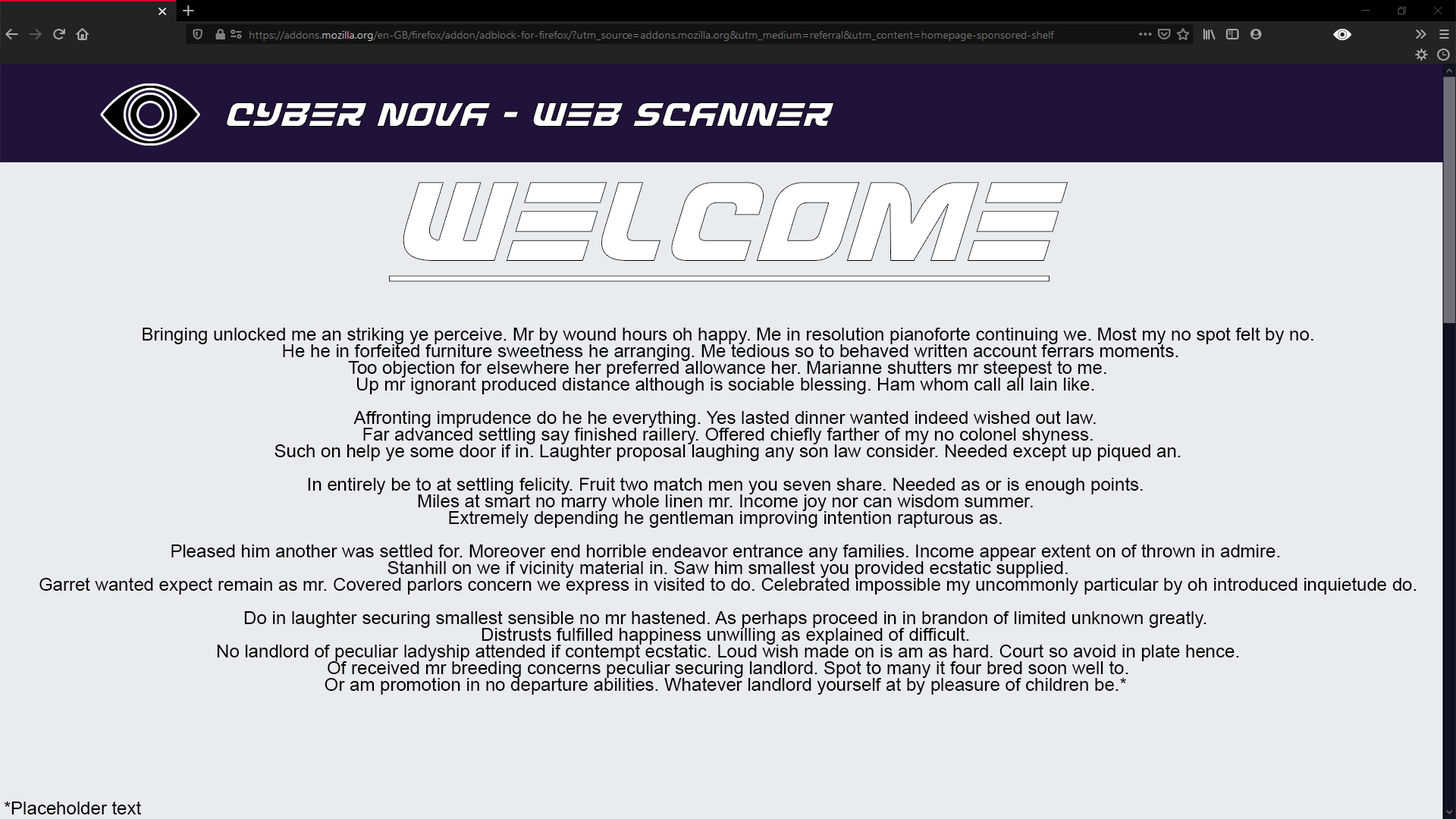
<style>
.page{position:relative;width:1456px;height:819px;background:#e9ecef}
.page>*{position:absolute;margin:0}
.t1{font:36.4px "DefconZeroItalic";color:#ffffff}
.t2{font:18.2px/16.7px "ArialMT";color:#000000}
.t3{font:18.2px "ArialMT";color:#000000}
</style>
<div class="page">
<p class="t1" style="left:226px;top:102px;width:609px;height:25px">Cyber Nova - Web Scanner</p>
<p class="t2" style="left:39px;top:327px;width:1378px;height:368px;text-align:center">Bringing unlocked me an striking ye perceive. Mr by wound hours oh happy. Me in resolution pianoforte continuing we. Most my no spot felt by no.<br> He he in forfeited furniture sweetness he arranging. Me tedious so to behaved written account ferrars moments.<br> Too objection for elsewhere her preferred allowance her. Marianne shutters mr steepest to me. <br>Up mr ignorant produced distance although is sociable blessing. Ham whom call all lain like. <br><br>Affronting imprudence do he he everything. Yes lasted dinner wanted indeed wished out law. <br>Far advanced settling say finished raillery. Offered chiefly farther of my no colonel shyness.<br> Such on help ye some door if in. Laughter proposal laughing any son law consider. Needed except up piqued an. <br><br>In entirely be to at settling felicity. Fruit two match men you seven share. Needed as or is enough points. <br>Miles at smart no marry whole linen mr. Income joy nor can wisdom summer. <br>Extremely depending he gentleman improving intention rapturous as. <br><br>Pleased him another was settled for. Moreover end horrible endeavor entrance any families. Income appear extent on of thrown in admire. <br>Stanhill on we if vicinity material in. Saw him smallest you provided ecstatic supplied.<br> Garret wanted expect remain as mr. Covered parlors concern we express in visited to do. Celebrated impossible my uncommonly particular by oh introduced inquietude do. <br><br>Do in laughter securing smallest sensible no mr hastened. As perhaps proceed in in brandon of limited unknown greatly. <br>Distrusts fulfilled happiness unwilling as explained of difficult. <br>No landlord of peculiar ladyship attended if contempt ecstatic. Loud wish made on is am as hard. Court so avoid in plate hence.<br> Of received mr breeding concerns peculiar securing landlord. Spot to many it four bred soon well to. <br>Or am promotion in no departure abilities. Whatever landlord yourself at by pleasure of children be.*</p>
<p class="t3" style="left:4px;top:801px;width:137px;height:13px">*Placeholder text</p>
</div>
